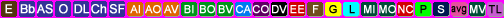
<style>
.page{position:relative;width:504px;height:18px;background:#ff00ff}
.page>*{position:absolute;margin:0}
.t1{font:12px "ArialMT";color:#ffffff;font-weight:bold}
.t2{font:11px "ArialMT";color:#ffffff;font-weight:bold}
.t3{font:11px "ArialMT";color:#000000;font-weight:bold}
.t4{font:11px "ArialMT";color:#010101;font-weight:bold}
.t5{font:11px "ArialMT";color:#010101;font-weight:bold;scale:0.86 1}
</style>
<div class="page">
<p class="t1" style="left:5px;top:4px;width:8px;height:10px">E</p>
<p class="t1" style="left:20px;top:4px;width:15px;height:10px">Bb</p>
<p class="t1" style="left:36px;top:4px;width:17px;height:10px">AS</p>
<p class="t1" style="left:59px;top:4px;width:9px;height:10px">O</p>
<p class="t1" style="left:74px;top:4px;width:16px;height:10px">DL</p>
<p class="t1" style="left:91px;top:4px;width:16px;height:10px">Ch</p>
<p class="t1" style="left:109px;top:4px;width:16px;height:10px">SF</p>
<p class="t2" style="left:130px;top:5px;width:10px;height:9px">AI</p>
<p class="t2" style="left:145px;top:5px;width:16px;height:9px">AO</p>
<p class="t2" style="left:164px;top:5px;width:15px;height:9px">AV</p>
<p class="t2" style="left:184px;top:5px;width:10px;height:9px">BI</p>
<p class="t2" style="left:200px;top:5px;width:15px;height:9px">BO</p>
<p class="t2" style="left:218px;top:5px;width:15px;height:9px">BV</p>
<p class="t2" style="left:236px;top:5px;width:15px;height:9px">CA</p>
<p class="t2" style="left:252px;top:5px;width:17px;height:9px">CO</p>
<p class="t2" style="left:272px;top:5px;width:15px;height:9px">DV</p>
<p class="t2" style="left:290px;top:5px;width:15px;height:9px">EE</p>
<p class="t2" style="left:313px;top:5px;width:6px;height:9px">F</p>
<p class="t3" style="left:329px;top:5px;width:8px;height:9px">G</p>
<p class="t3" style="left:349px;top:5px;width:6px;height:9px">L</p>
<p class="t2" style="left:364px;top:5px;width:11px;height:9px">MI</p>
<p class="t2" style="left:379px;top:5px;width:17px;height:9px">MO</p>
<p class="t2" style="left:398px;top:5px;width:16px;height:9px">NC</p>
<p class="t4" style="left:420px;top:5px;width:7px;height:9px">P</p>
<p class="t2" style="left:437px;top:5px;width:8px;height:9px">S</p>
<p class="t5" style="left:451px;top:6px;width:16px;height:9px">avg</p>
<p class="t2" style="left:470px;top:5px;width:16px;height:9px">MV</p>
<p class="t4" style="left:488px;top:5px;width:14px;height:9px">TL</p>
</div>
